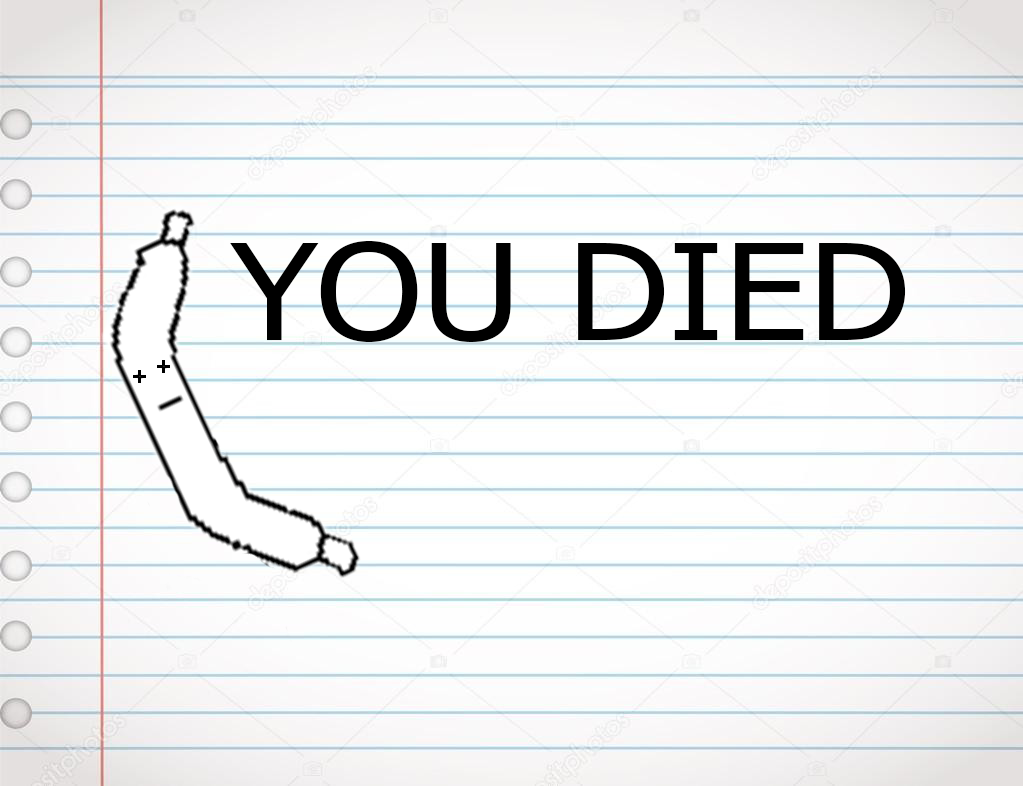
<style>
.page{position:relative;width:1023px;height:786px}
.page>*{position:absolute;margin:0}
.t1{font:132.9px "Tahoma";color:#000000;scale:1.13 1}
</style>
<div class="page">
<p class="t1" style="left:230px;top:241px;width:676px;height:101px">YOU DIED</p>
</div>
